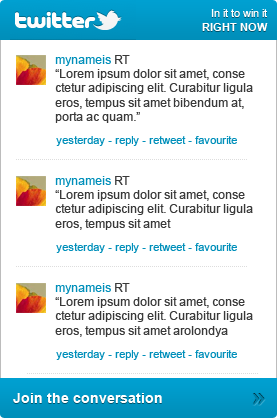
<style>
.page{position:relative;width:277px;height:418px;background:#ffffff}
.page>*{position:absolute;margin:0}
.t1{font:11px/13.6px "ArialMT";color:#ffffff}
.t2{font:11px/13.6px "Arial-BoldMT";color:#ffffff}
.t3{font:12px "ArialMT";color:#393939}
.t4{font:12px "ArialMT";color:#008fba}
.t5{font:11px "ArialMT";color:#008fba}
.t6{font:14px "Arial-BoldMT";color:#ffffff}
</style>
<div class="page">
<p class="t1" style="left:202px;top:9px;width:66px;height:22px;text-align:right">In it to win it<br><span class="t2">RIGHT NOW</span></p>
<p class="t3" style="left:55px;top:55px;width:198px;height:68px"><span class="t4">mynameis </span>RT<br>“Lorem ipsum dolor sit amet, conse ctetur adipiscing elit. Curabitur ligula eros, tempus sit amet bibendum at, porta ac quam.”</p>
<p class="t5" style="left:56px;top:136px;width:181px;height:10px">yesterday - reply - retweet - favourite</p>
<p class="t3" style="left:55px;top:176px;width:198px;height:54px"><span class="t4">mynameis </span>RT<br>“Lorem ipsum dolor sit amet, conse ctetur adipiscing elit. Curabitur ligula eros, tempus sit amet</p>
<p class="t5" style="left:56px;top:243px;width:181px;height:10px">yesterday - reply - retweet - favourite</p>
<p class="t3" style="left:55px;top:283px;width:198px;height:54px"><span class="t4">mynameis </span>RT<br>“Lorem ipsum dolor sit amet, conse ctetur adipiscing elit. Curabitur ligula eros, tempus sit amet arolondya</p>
<p class="t5" style="left:56px;top:350px;width:181px;height:10px">yesterday - reply - retweet - favourite</p>
<p class="t6" style="left:13px;top:393px;width:149px;height:10px">Join the conversation</p>
</div>
